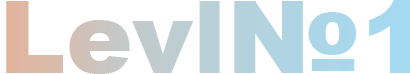
<style>
.page{position:relative;width:410px;height:74px;background:#ffffff}
.page>*{position:absolute;margin:0}
.t1{font:100px "Arial-Black"}
</style>
<div class="page">
<p class="t1" style="left:6px;top:0px;width:405px;height:74px">Levl№1</p>
</div>
